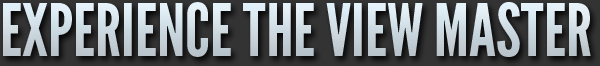
<style>
.page{position:relative;width:600px;height:66px}
.page>*{position:absolute;margin:0}
.t1{font:72px "LeagueGothic"}
</style>
<div class="page">
<p class="t1" style="left:3px;top:2px;width:588px;height:55px">EXPERIENCE THE VIEW MASTER</p>
</div>
